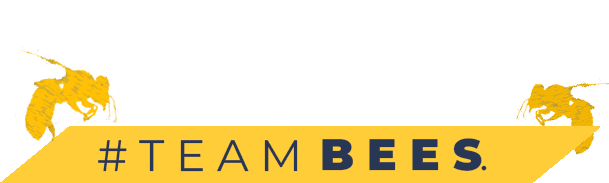
<style>
.page{position:relative;width:609px;height:183px;background:#ffffff}
.page>*{position:absolute;margin:0}
.t1{font:44px "MontserratRoman-Regular";color:#273755}
.t2{font:44px "MontserratRoman-Black";color:#273755}
.t3{font:16px "MontserratRoman-Black";color:#273755}
</style>
<div class="page">
<p class="t1" style="left:98px;top:140px;width:200px;height:32px"># T E A M</p>
<p class="t2" style="left:322px;top:138px;width:165px;height:33px">B E E S<span class="t3">.</span></p>
</div>
